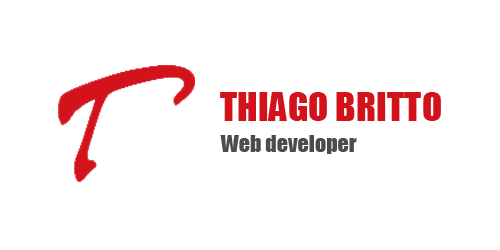
<style>
.page{position:relative;width:500px;height:250px;background:#ffffff}
.page>*{position:absolute;margin:0}
.t1{font:36.8px "Impact";color:#d3131c;text-transform:uppercase}
.t2{font:21.7px "Impact";color:#4c4c4b}
</style>
<div class="page">
<p class="t1" style="left:220px;top:92px;width:221px;height:29px">thiago BRITTO</p>
<p class="t2" style="left:220px;top:135px;width:137px;height:19px">Web developer</p>
</div>
